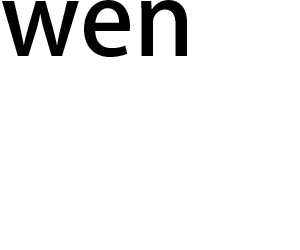
<style>
.page{position:relative;width:300px;height:250px;background:#ffffff}
.page>*{position:absolute;margin:0}
.t1{font:100px "AdobeFanHeitiStd-Bold";color:#000000}
</style>
<div class="page">
<p class="t1" style="left:2px;top:0px;width:185px;height:57px">wen</p>
</div>
